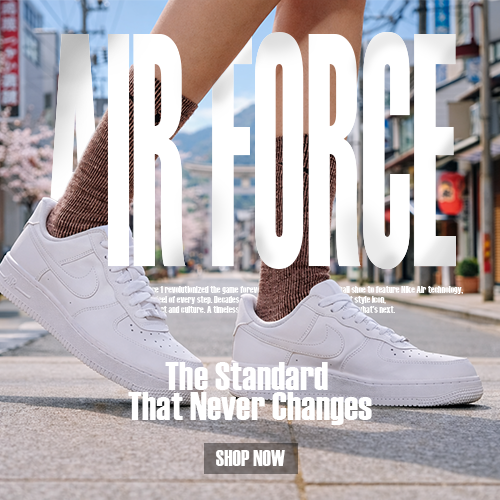
<style>
.page{position:relative;width:500px;height:500px}
.page>*{position:absolute;margin:0}
.t1{font:332px "Haettenschweiler";color:#ffffff;scale:0.41 1}
.t2{font:40px/30px "Haettenschweiler";color:#ffffff}
.t3{font:22px "Haettenschweiler";color:#ffffff}
</style>
<div class="page">
<p class="t1" style="left:46px;top:32px;width:410px;height:237px">AIR FORCE</p>
<p class="t2" style="left:128px;top:362px;width:244px;height:63px;text-align:center">The Standard <br>That Never Changes</p>
<p class="t3" style="left:216px;top:450px;width:69px;height:16px">SHOP NOW</p>
</div>
